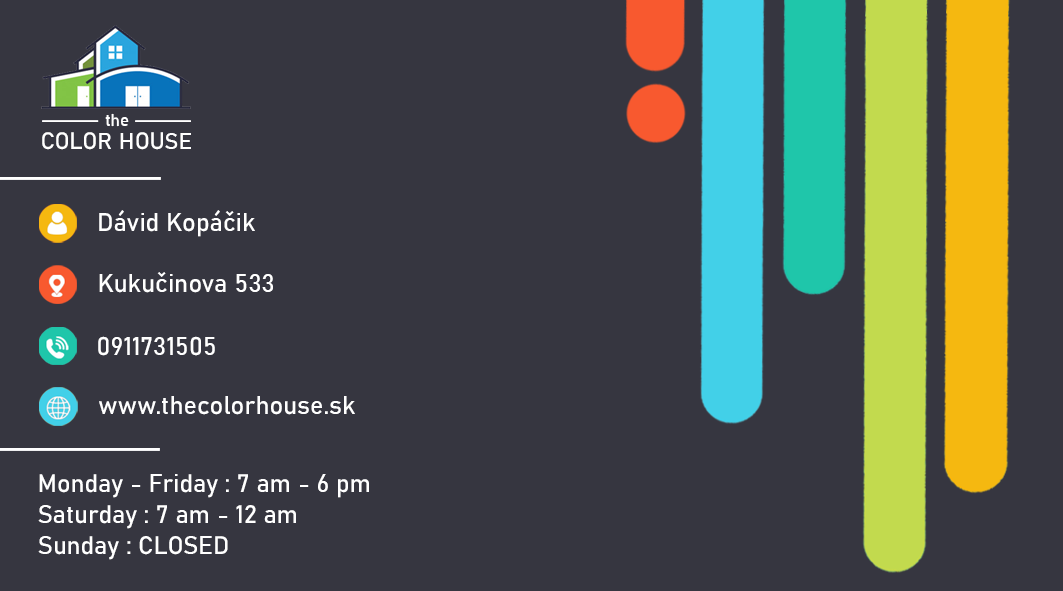
<style>
.page{position:relative;width:1063px;height:591px;background:#363640}
.page>*{position:absolute;margin:0}
.t1{font:16.7px "Bahnschrift";color:#ffffff}
.t2{font:23.4px "Bahnschrift";color:#ffffff}
.t3{font:25.3px "Bahnschrift";color:#ffffff}
.t4{font:25px "Bahnschrift";color:#ffffff}
</style>
<div class="page">
<p class="t1" style="left:105px;top:113px;width:24px;height:14px">the</p>
<p class="t2" style="left:42px;top:132px;width:149px;height:18px">COLOR HOUSE</p>
<p class="t3" style="left:99px;top:210px;width:156px;height:27px">Dávid Kopáčik</p>
<p class="t3" style="left:99px;top:272px;width:174px;height:21px">Kukučinova 533</p>
<p class="t3" style="left:98px;top:336px;width:117px;height:20px">0911731505</p>
<p class="t3" style="left:99px;top:396px;width:256px;height:19px">www.thecolorhouse.sk</p>
<p class="t4" style="left:39px;top:474px;width:330px;height:24px">Monday - Friday : 7 am - 6 pm</p>
<p class="t4" style="left:38px;top:505px;width:258px;height:24px">Saturday : 7 am - 12 am</p>
<p class="t4" style="left:38px;top:536px;width:190px;height:24px">Sunday : CLOSED</p>
</div>
